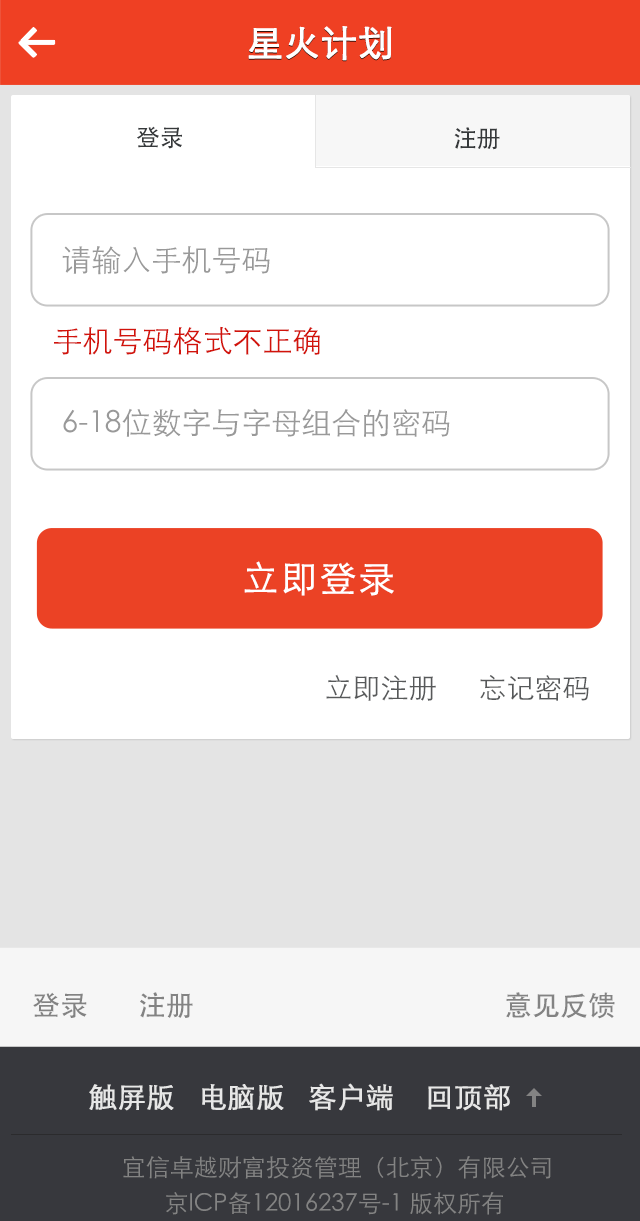
<style>
.page{position:relative;width:640px;height:1221px;background:#ffffff}
.page>*{position:absolute;margin:0}
.t1{font:36px "STXihei";color:#ffffff;font-weight:bold}
.t2{font:24px "STHeiti";letter-spacing:-0.02em;color:#36393b}
.t3{font:30.2px "STXihei";color:#999999}
.t4{font:30.2px "STXihei";color:#d2130b}
.t5{font:36px "STXihei";letter-spacing:0.05em;color:#ffffff;font-weight:bold}
.t6{font:28px "STXihei";color:#57595a}
.t7{font:28px "AdobeHeitiStd-Regular";color:#838383}
.t8{font:28px "STXihei";color:#e7e7e7;font-weight:bold}
.t9{font:24px/36px "STXihei";color:#838383}
</style>
<div class="page">
<p class="t1" style="left:248px;top:26px;width:144px;height:35px">星火计划</p>
<p class="t2" style="left:137px;top:126px;width:45px;height:23px">登录</p>
<p class="t2" style="left:454px;top:127px;width:46px;height:23px">注册</p>
<p class="t3" style="left:62px;top:246px;width:208px;height:29px">请输入手机号码</p>
<p class="t4" style="left:54px;top:326px;width:266px;height:29px">手机号码格式不正确</p>
<p class="t3" style="left:63px;top:408px;width:387px;height:29px">6-18位数字与字母组合的密码</p>
<p class="t5" style="left:244px;top:561px;width:150px;height:35px">立即登录</p>
<p class="t6" style="left:326px;top:674px;width:263px;height:27px">立即注册      忘记密码</p>
<p class="t7" style="left:33px;top:992px;width:160px;height:26px">登录        注册</p>
<p class="t7" style="left:506px;top:992px;width:109px;height:27px">意见反馈</p>
<p class="t8" style="left:89px;top:1083px;width:421px;height:28px">触屏版   电脑版   客户端    回顶部</p>
<p class="t9" style="left:123px;top:1156px;width:428px;height:59px;text-align:center">宜信卓越财富投资管理（北京）有限公司<br>京ICP备12016237号-1 版权所有</p>
</div>
